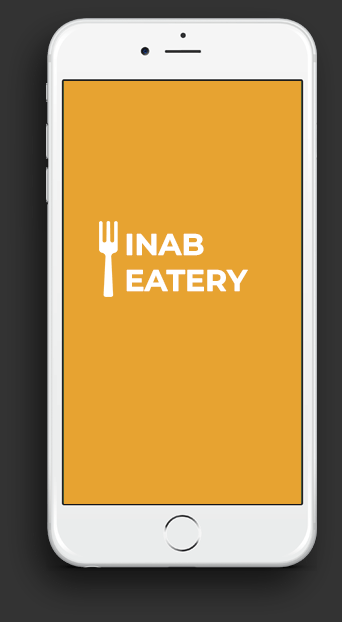
<style>
.page{position:relative;width:342px;height:622px;background:#e7a331}
.page>*{position:absolute;margin:0}
.t1{font:30px "MontserratRoman-Bold";color:#ffffff}
</style>
<div class="page">
<p class="t1" style="left:126px;top:233px;width:122px;height:59px">INAB EATERY</p>
</div>
